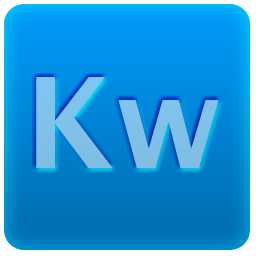
<style>
.page{position:relative;width:256px;height:256px}
.page>*{position:absolute;margin:0}
.t1{font:126.1px "LucidaSans-Demi";color:#80c1e9}
</style>
<div class="page">
<p class="t1" style="left:36px;top:77px;width:183px;height:91px">Kw</p>
</div>
